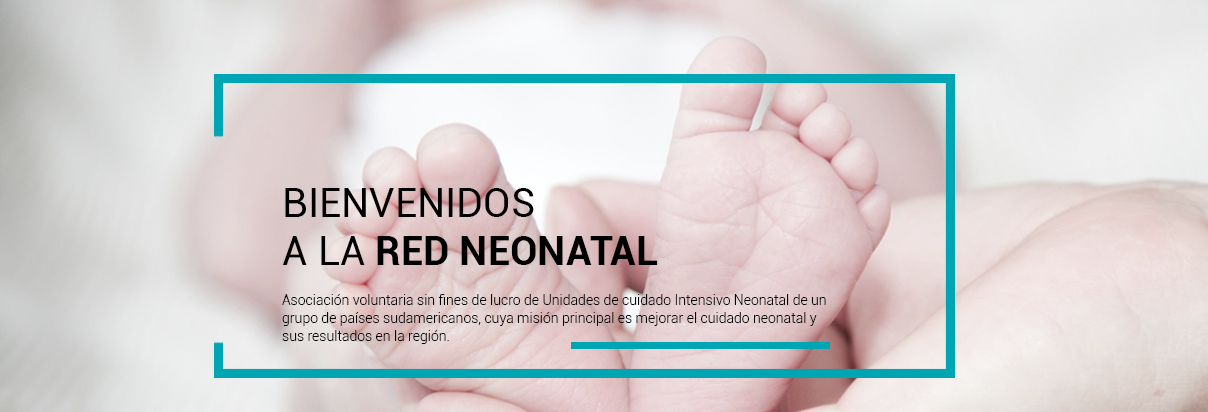
<style>
.page{position:relative;width:1208px;height:412px}
.page>*{position:absolute;margin:0}
.t1{font:40px/48px "Roboto-Regular";color:#000000}
.t2{font:40px/48px "Roboto-Bold";color:#000000}
.t3{font:14px/18px "Roboto-Light";color:#000000}
</style>
<div class="page">
<p class="t1" style="left:282px;top:188px;width:376px;height:77px">BIENVENIDOS<br>A LA <span class="t2">RED NEONATAL</span></p>
<p class="t3" style="left:282px;top:294px;width:544px;height:50px">Asociación voluntaria sin fines de lucro de Unidades de cuidado Intensivo Neonatal de un<br>grupo de países sudamericanos, cuya misión principal es mejorar el cuidado neonatal y <br>sus resultados en la región.</p>
</div>
